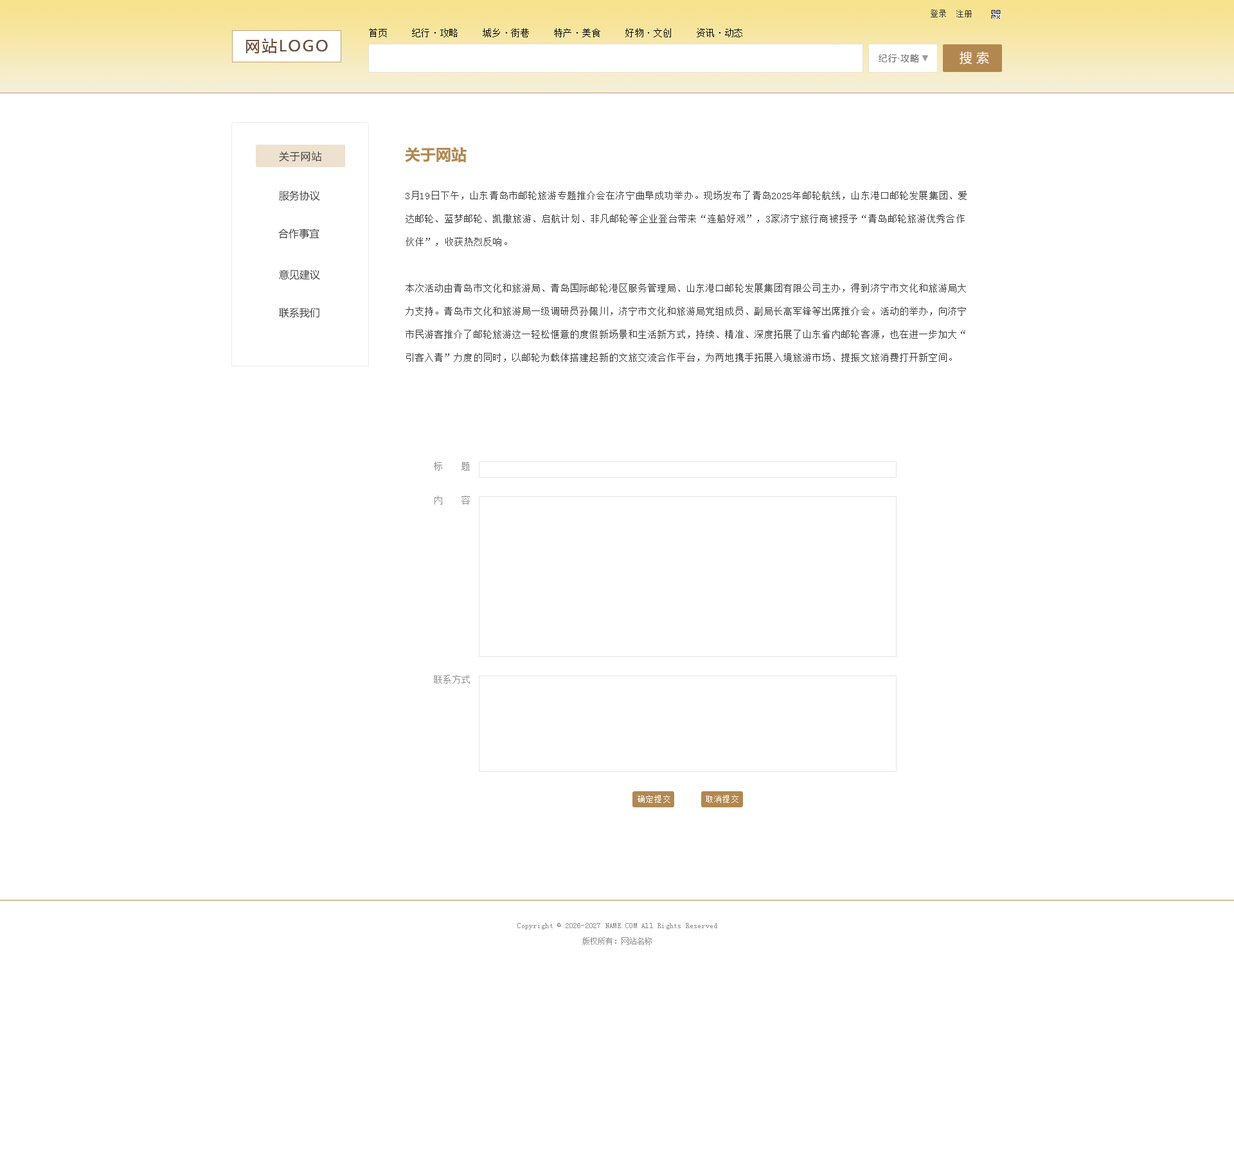
<style>
.page{position:relative;width:1234px;height:1157px;background:#ffffff}
.page>*{position:absolute;margin:0}
.t1{font:8.4px "SimSun";color:#333333}
.t2{font:9px "SimSun";letter-spacing:0.05em;color:#000000}
.t3{font:9px "MicrosoftYaHei";letter-spacing:0.075em;color:#595959}
.t4{font:12.9px "MicrosoftYaHei";color:#ffffff}
.t5{font:9px "MicrosoftYaHei";color:#a09d9d}
.t6{font:15.4px "MicrosoftYaHei-Bold";color:#b28850}
.t7{font:10.3px "MicrosoftYaHei";letter-spacing:0.05em;color:#3a3a3a}
.t8{font:10.3px "MicrosoftYaHei";color:#3a3a3a}
.t9{font:9.6px/23.1px "SimSun";color:#3a3938}
.t10{font:7.7px "AdobeHeitiStd-Regular";color:#000000}
.t11{font:9px "SimSun";letter-spacing:0.02em;color:#8b8b8b}
.t12{font:7.7px "SimSun";letter-spacing:0.1em;color:#ffffff}
.t13{font:7.7px/15.4px "SimSun";letter-spacing:0.02em;color:#8d8e90}
</style>
<div class="page">
<p class="t1" style="left:931px;top:10px;width:41px;height:7px">登录  注册</p>
<p class="t2" style="left:369px;top:28px;width:373px;height:9px">首页　　 纪行·攻略　　 城乡·街巷　　 特产·美食  　 好物·文创　　 资讯·动态</p>
<p class="t3" style="left:879px;top:53px;width:40px;height:10px">纪行·攻略</p>
<p class="t4" style="left:960px;top:51px;width:29px;height:13px">搜 索</p>
<p class="t5" style="left:922px;top:55px;width:7px;height:7px">▼</p>
<p class="t6" style="left:405px;top:147px;width:62px;height:16px">关于网站</p>
<p class="t7" style="left:279px;top:151px;width:43px;height:11px">关于网站</p>
<p class="t8" style="left:279px;top:190px;width:41px;height:11px">服务协议</p>
<p class="t9" style="left:406px;top:191px;width:561px;height:171px">3月19日下午，山东青岛市邮轮旅游专题推介会在济宁曲阜成功举办。现场发布了青岛2025年邮轮航线，山东港口邮轮发展集团、爱达邮轮、蓝梦邮轮、凯撒旅游、启航计划、非凡邮轮等企业登台带来“连船好戏”，3家济宁旅行商被授予“青岛邮轮旅游优秀合作伙伴”，收获热烈反响。<br><br>本次活动由青岛市文化和旅游局、青岛国际邮轮港区服务管理局、山东港口邮轮发展集团有限公司主办，得到济宁市文化和旅游局大力支持。青岛市文化和旅游局一级调研员孙佩川，济宁市文化和旅游局党组成员、副局长高军锋等出席推介会。活动的举办，向济宁市民游客推介了邮轮旅游这一轻松惬意的度假新场景和生活新方式，持续、精准、深度拓展了山东省内邮轮客源，也在进一步加大“引客入青”力度的同时，以邮轮为载体搭建起新的文旅交流合作平台，为两地携手拓展入境旅游市场、提振文旅消费打开新空间。</p>
<p class="t8" style="left:278px;top:228px;width:42px;height:11px">合作事宜</p>
<p class="t8" style="left:279px;top:269px;width:41px;height:11px">意见建议</p>
<p class="t8" style="left:279px;top:307px;width:41px;height:11px"><span class="t10"> </span>联系我们</p>
<p class="t11" style="left:434px;top:462px;width:36px;height:9px">标　　题</p>
<p class="t11" style="left:435px;top:496px;width:35px;height:9px">内　　容</p>
<p class="t11" style="left:434px;top:675px;width:36px;height:9px">联系方式</p>
<p class="t12" style="left:638px;top:795px;width:32px;height:8px">确定提交</p>
<p class="t12" style="left:706px;top:795px;width:33px;height:8px">取消提交</p>
<p class="t13" style="left:518px;top:923px;width:199px;height:22px;text-align:center">Copyright © 2026-2027 NAME.COM All Rights Reserved<br>版权所有：网站名称</p>
</div>
